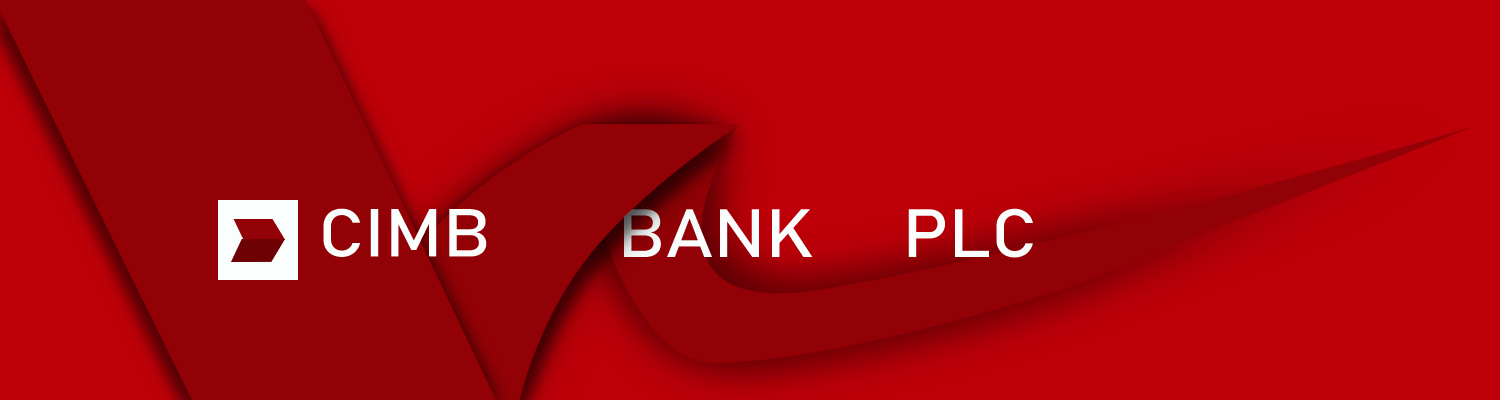
<style>
.page{position:relative;width:1500px;height:400px;background:#be0008}
.page>*{position:absolute;margin:0}
.t1{font:66.7px "Bahnschrift";color:#fafefd;scale:1.12 1}
.t2{font:67.2px "Bahnschrift";color:#fafefd;scale:1.11 1}
</style>
<div class="page">
<p class="t1" style="left:323px;top:208px;width:164px;height:49px">CIMB</p>
<p class="t2" style="left:624px;top:208px;width:409px;height:50px">BANK       PLC</p>
</div>
